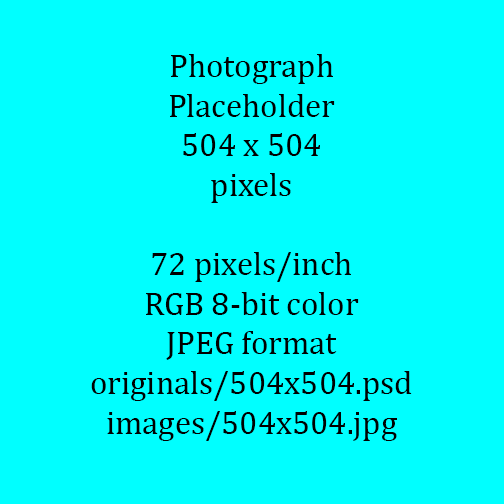
<style>
.page{position:relative;width:504px;height:504px;background:#00ffff}
.page>*{position:absolute;margin:0}
.t1{font:33px "Cambria";color:#000000}
</style>
<div class="page">
<p class="t1" style="left:91px;top:54px;width:321px;height:387px;text-align:center">Photograph<br>Placeholder<br>504 x 504<br>pixels<br><br>72 pixels/inch<br>RGB 8-bit color<br>JPEG format<br>originals/504x504.psd<br>images/504x504.jpg</p>
</div>
